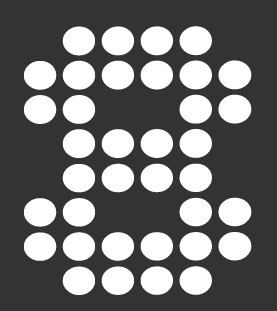
<style>
.page{position:relative;width:277px;height:311px;background:#333333}
.page>*{position:absolute;margin:0}
.t1{font:402.7px "Ozone";color:#ffffff;scale:1.14 1}
</style>
<div class="page">
<p class="t1" style="left:23px;top:26px;width:229px;height:269px">8</p>
</div>
